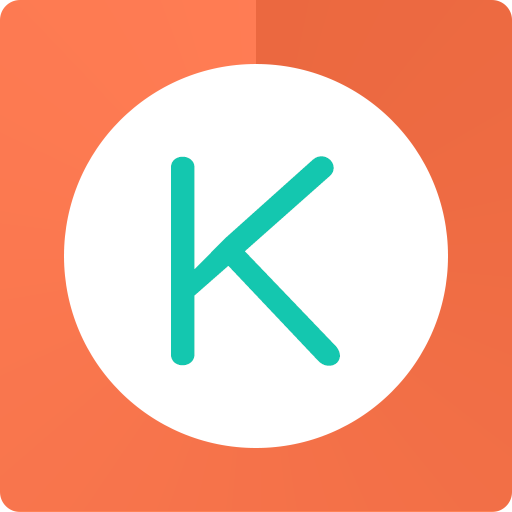
<style>
.page{position:relative;width:512px;height:512px;background:#ffffff}
.page>*{position:absolute;margin:0}
.t1{font:319.9px "Hero";letter-spacing:-0.04em;color:#14c7af}
</style>
<div class="page">
<p class="t1" style="left:171px;top:156px;width:169px;height:210px">K</p>
</div>
